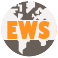
<style>
.page{position:relative;width:58px;height:58px;background:#ffffff}
.page>*{position:absolute;margin:0}
.t1{font:24px "GillSans-UltraBoldCondensed";color:#ff931e}
</style>
<div class="page">
<p class="t1" style="left:7px;top:21px;width:43px;height:18px">EWS</p>
</div>
